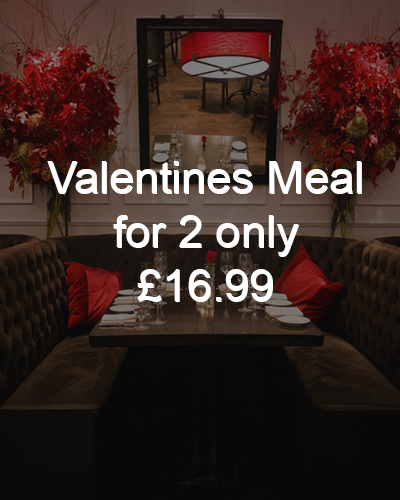
<style>
.page{position:relative;width:400px;height:500px}
.page>*{position:absolute;margin:0}
.t1{font:45px "ArialMT";color:#ffffff}
</style>
<div class="page">
<p class="t1" style="left:47px;top:161px;width:314px;height:140px;text-align:center">Valentines Meal<br>for 2 only<br>£16.99</p>
<p class="t1" style="left:48px;top:162px;width:314px;height:140px;text-align:center">Valentines Meal<br>for 2 only<br>£16.99</p>
</div>
